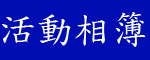
<style>
.page{position:relative;width:150px;height:60px;background:#000eb3}
.page>*{position:absolute;margin:0}
.t1{font:37.5px "DFKaiShu-SB-Estd-BF";color:#ffffff}
</style>
<div class="page">
<p class="t1" style="left:2px;top:12px;width:144px;height:35px">活動相簿</p>
</div>
